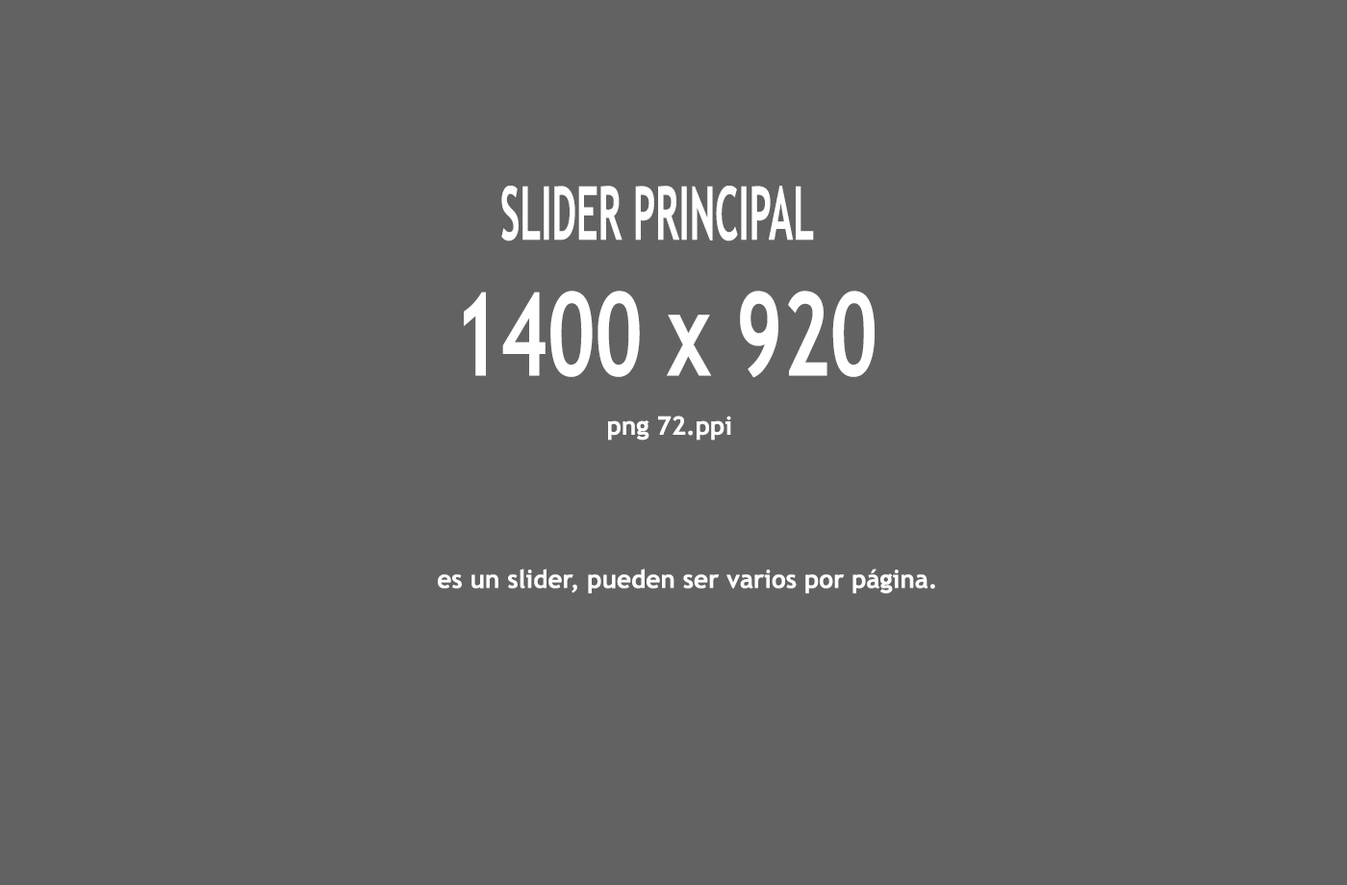
<style>
.page{position:relative;width:1347px;height:885px;background:#626262}
.page>*{position:absolute;margin:0}
.t1{font:74.3px "TrebuchetMS-Bold";color:#ffffff;scale:0.52 1}
.t2{font:116.1px "TrebuchetMS-Bold";color:#ffffff;scale:0.7 1}
.t3{font:25.2px "TrebuchetMS-Bold";color:#ffffff}
</style>
<div class="page">
<p class="t1" style="left:501px;top:186px;width:313px;height:56px">SLIDER PRINCIPAL</p>
<p class="t2" style="left:464px;top:291px;width:411px;height:87px">1400 x 920</p>
<p class="t3" style="left:608px;top:416px;width:123px;height:25px">png 72.ppi</p>
<p class="t3" style="left:438px;top:569px;width:497px;height:25px">es un slider, pueden ser varios por página.</p>
</div>
